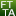
<style>
.page{position:relative;width:16px;height:16px}
.page>*{position:absolute;margin:0}
.t1{font:14.1px "ClearSans";font-variant:small-caps;scale:1.15 1}
.t2{font:14.1px "ClearSans";color:#ffffff;font-variant:small-caps;scale:1.15 1}
</style>
<div class="page">
<p class="t1" style="left:1px;top:1px;width:12px;height:7px">ft</p>
<p class="t2" style="left:2px;top:9px;width:13px;height:7px">ta</p>
</div>
